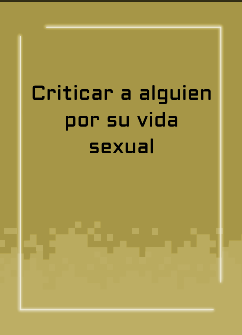
<style>
.page{position:relative;width:242px;height:335px;background:#a69647}
.page>*{position:absolute;margin:0}
.t1{font:20px/26.7px "Aldrich-Regular";letter-spacing:0.015em;color:#000000}
</style>
<div class="page">
<p class="t1" style="left:32px;top:85px;width:179px;height:69px;text-align:center">Criticar a alguien<br>por su vida<br>sexual</p>
</div>
